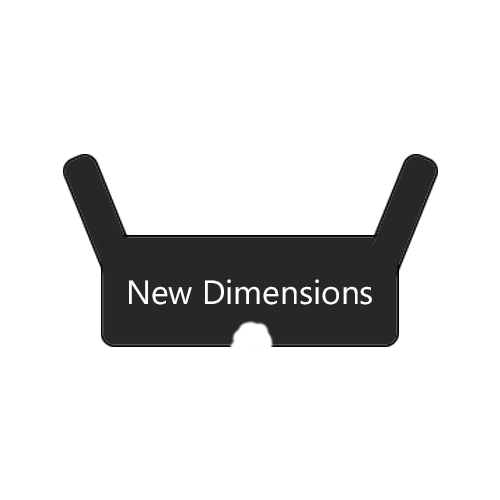
<style>
.page{position:relative;width:500px;height:500px;background:#ffffff}
.page>*{position:absolute;margin:0}
.t1{font:33.6px "Ebrima";color:#fefefe}
</style>
<div class="page">
<p class="t1" style="left:129px;top:279px;width:243px;height:26px">New Dimensions</p>
</div>
